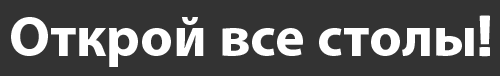
<style>
.page{position:relative;width:500px;height:76px;background:#333333}
.page>*{position:absolute;margin:0}
.t1{font:57px "MyriadPro-Bold";color:#ffffff}
.t2{font:57px "LilitaOne";color:#ffffff}
</style>
<div class="page">
<p class="t1" style="left:11px;top:15px;width:479px;height:52px">Открой все столы<span class="t2">!</span></p>
</div>
